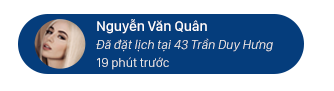
<style>
.page{position:relative;width:334px;height:91px;background:#ffffff}
.page>*{position:absolute;margin:0}
.t1{font:14.3px "SanFranciscoDisplay-Medium";color:#ffffff}
.t2{font:13px "SanFranciscoDisplay-Regular";color:#e9e9e9;font-style:italic}
.t3{font:13px "SanFranciscoDisplay-Regular";color:#e9e9e9}
</style>
<div class="page">
<p class="t1" style="left:97px;top:19px;width:110px;height:15px">Nguyễn Văn Quân</p>
<p class="t2" style="left:96px;top:38px;width:177px;height:14px">Đã đặt lịch tại 43 Trần Duy Hưng</p>
<p class="t3" style="left:97px;top:57px;width:72px;height:13px">19 phút trước</p>
</div>
